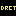
<style>
.page{position:relative;width:16px;height:16px;background:#000000}
.page>*{position:absolute;margin:0}
.t1{font:7px "Br-Ocrb";color:#f0f080;font-weight:bold}
</style>
<div class="page">
<p class="t1" style="left:1px;top:6px;width:15px;height:4px">DRCT</p>
</div>
